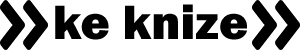
<style>
.page{position:relative;width:300px;height:50px;background:#ffffff}
.page>*{position:absolute;margin:0}
.t1{font:50px "FranklinGothic-Heavy";color:#000000}
</style>
<div class="page">
<p class="t1" style="left:55px;top:4px;width:192px;height:36px">ke knize</p>
</div>
